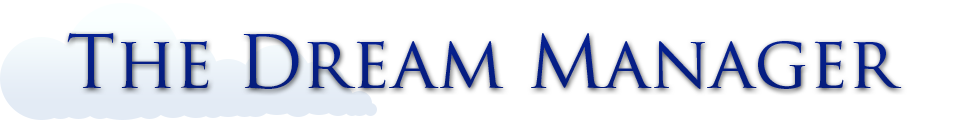
<style>
.page{position:relative;width:960px;height:120px;background:#ffffff}
.page>*{position:absolute;margin:0}
.t1{font:72px "TrajanPro-Regular";color:#062192}
</style>
<div class="page">
<p class="t1" style="left:67px;top:33px;width:835px;height:56px">The Dream Manager</p>
</div>
